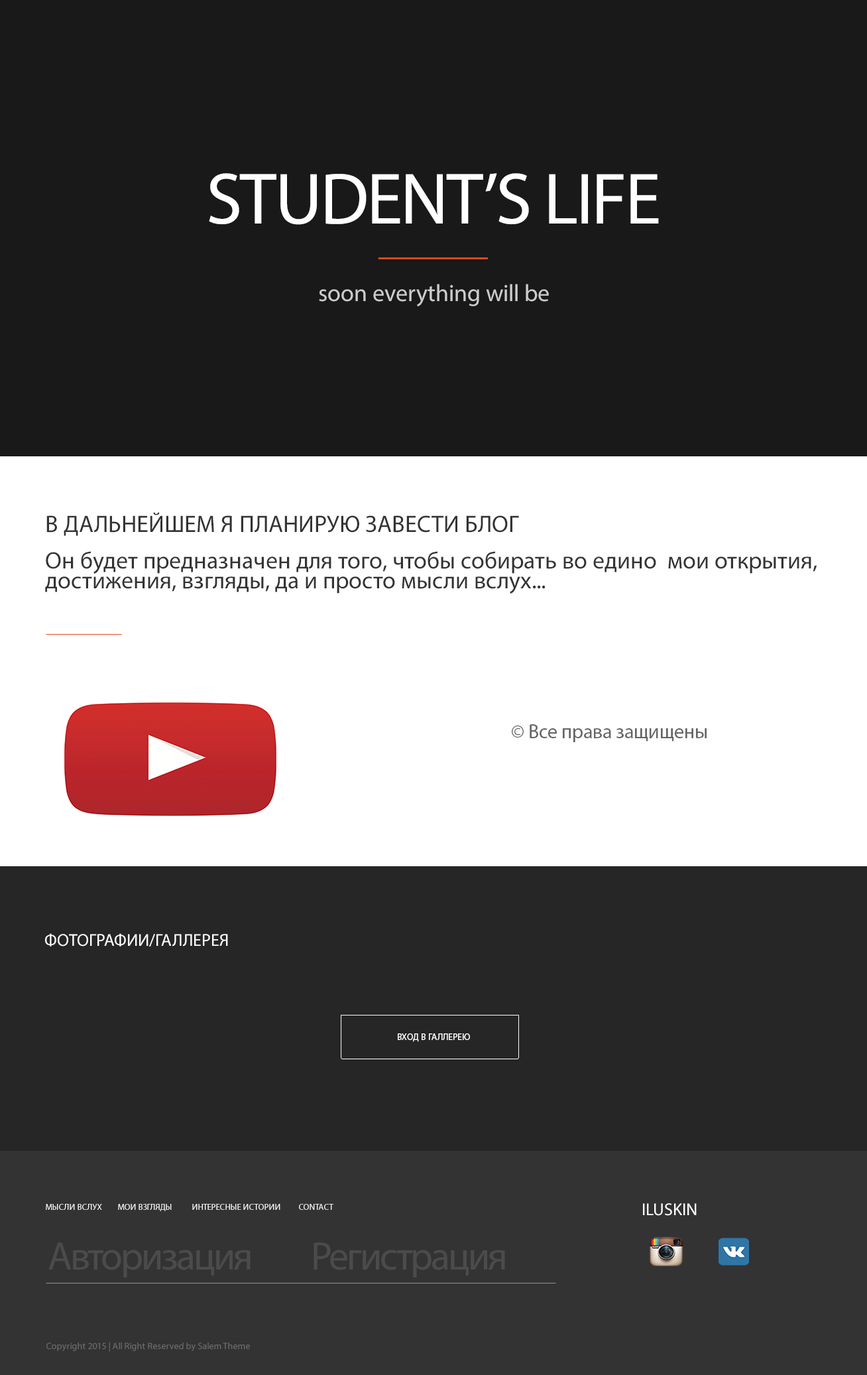
<style>
.page{position:relative;width:867px;height:1375px;background:#191919}
.page>*{position:absolute;margin:0}
.t1{font:72.9px "MyriadPro-Regular";letter-spacing:-0.025em;color:#ffffff;text-transform:uppercase}
.t2{font:23.9px "MyriadPro-Regular";color:#cccccc}
.t3{font:23.9px "MyriadPro-Regular";color:#333333;text-transform:uppercase}
.t4{font:23.9px/19.9px "MyriadPro-Regular";color:#333333}
.t5{font:19.9px "MyriadPro-Regular";color:#646464}
.t6{font:17.2px "MyriadPro-Regular";color:#ffffff;text-transform:uppercase}
.t7{font:9.3px "MyriadPro-Regular";color:#ffffff;text-transform:uppercase}
.t8{font:8.6px "MyriadPro-Regular";color:#ffffff;text-transform:uppercase}
.t9{font:17.2px "MyriadPro-Regular";color:#ffffff}
.t10{font:39.8px "MyriadPro-Regular";letter-spacing:-0.05em;color:#4c4b4b}
.t11{font:9.3px "MyriadPro-Regular";color:#6e6e6e}
</style>
<div class="page">
<p class="t1" style="left:209px;top:173px;width:450px;height:52px">STudent’s Life</p>
<p class="t2" style="left:319px;top:284px;width:230px;height:22px">soon everything will be</p>
<p class="t3" style="left:46px;top:512px;width:473px;height:24px">В дальнейшем я планирую завести блог</p>
<p class="t4" style="left:45px;top:551px;width:773px;height:43px">Он будет предназначен для того, чтобы собирать во едино  мои открытия, достижения, взгляды, да и просто мысли вслух...</p>
<p class="t5" style="left:512px;top:724px;width:195px;height:18px">© Все права защищены</p>
<p class="t6" style="left:45px;top:933px;width:183px;height:13px">Фотографии/Галлерея</p>
<p class="t7" style="left:398px;top:1033px;width:72px;height:9px">Вход в галлерею</p>
<p class="t8" style="left:46px;top:1204px;width:288px;height:7px">МЫСЛИ ВСЛУХ        МОИ ВЗГЛЯДЫ          ИНТЕРЕСНЫЕ ИСТОРИИ         Contact</p>
<p class="t9" style="left:643px;top:1203px;width:54px;height:13px">ILUSKIN</p>
<p class="t10" style="left:48px;top:1242px;width:457px;height:35px">Авторизация         Регистрация</p>
<p class="t11" style="left:46px;top:1342px;width:204px;height:10px">Copyright 2015 | All Right Reserved by Salem Theme</p>
</div>
